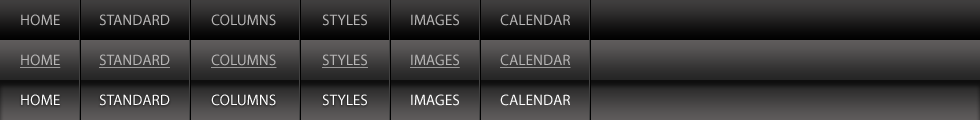
<style>
.page{position:relative;width:980px;height:120px}
.page>*{position:absolute;margin:0}
.t1{font:15.2px "MyriadPro-Regular";color:#b8b7b7;text-transform:uppercase}
.t2{font:15.2px "MyriadPro-Regular";color:#b8b7b7;text-transform:uppercase;text-decoration:underline}
.t3{font:15.2px "MyriadPro-Regular";color:#ffffff;text-transform:uppercase}
</style>
<div class="page">
<p class="t1" style="left:21px;top:14px;width:39px;height:12px">Home</p>
<p class="t1" style="left:99px;top:14px;width:71px;height:12px">Standard</p>
<p class="t1" style="left:211px;top:14px;width:65px;height:12px">Columns</p>
<p class="t1" style="left:322px;top:14px;width:45px;height:12px">Styles</p>
<p class="t1" style="left:411px;top:14px;width:48px;height:12px">Images</p>
<p class="t1" style="left:500px;top:14px;width:70px;height:12px">calendar</p>
<p class="t2" style="left:20px;top:54px;width:41px;height:14px">Home</p>
<p class="t2" style="left:99px;top:54px;width:71px;height:14px">Standard</p>
<p class="t2" style="left:211px;top:54px;width:66px;height:14px">Columns</p>
<p class="t2" style="left:322px;top:54px;width:46px;height:14px">Styles</p>
<p class="t2" style="left:410px;top:54px;width:50px;height:14px">Images</p>
<p class="t2" style="left:500px;top:54px;width:71px;height:14px">calendar</p>
<p class="t3" style="left:21px;top:94px;width:39px;height:12px">Home</p>
<p class="t3" style="left:99px;top:94px;width:71px;height:12px">Standard</p>
<p class="t3" style="left:211px;top:94px;width:65px;height:12px">Columns</p>
<p class="t3" style="left:322px;top:94px;width:45px;height:12px">Styles</p>
<p class="t3" style="left:411px;top:94px;width:48px;height:12px">Images</p>
<p class="t3" style="left:500px;top:94px;width:70px;height:12px">Calendar</p>
</div>
